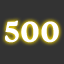
<style>
.page{position:relative;width:64px;height:64px;background:#333333}
.page>*{position:absolute;margin:0}
.t1{font:48px "P22MackinacExtraBold";color:#ffffff}
</style>
<div class="page">
<p class="t1" style="left:5px;top:20px;width:54px;height:23px">500</p>
</div>
